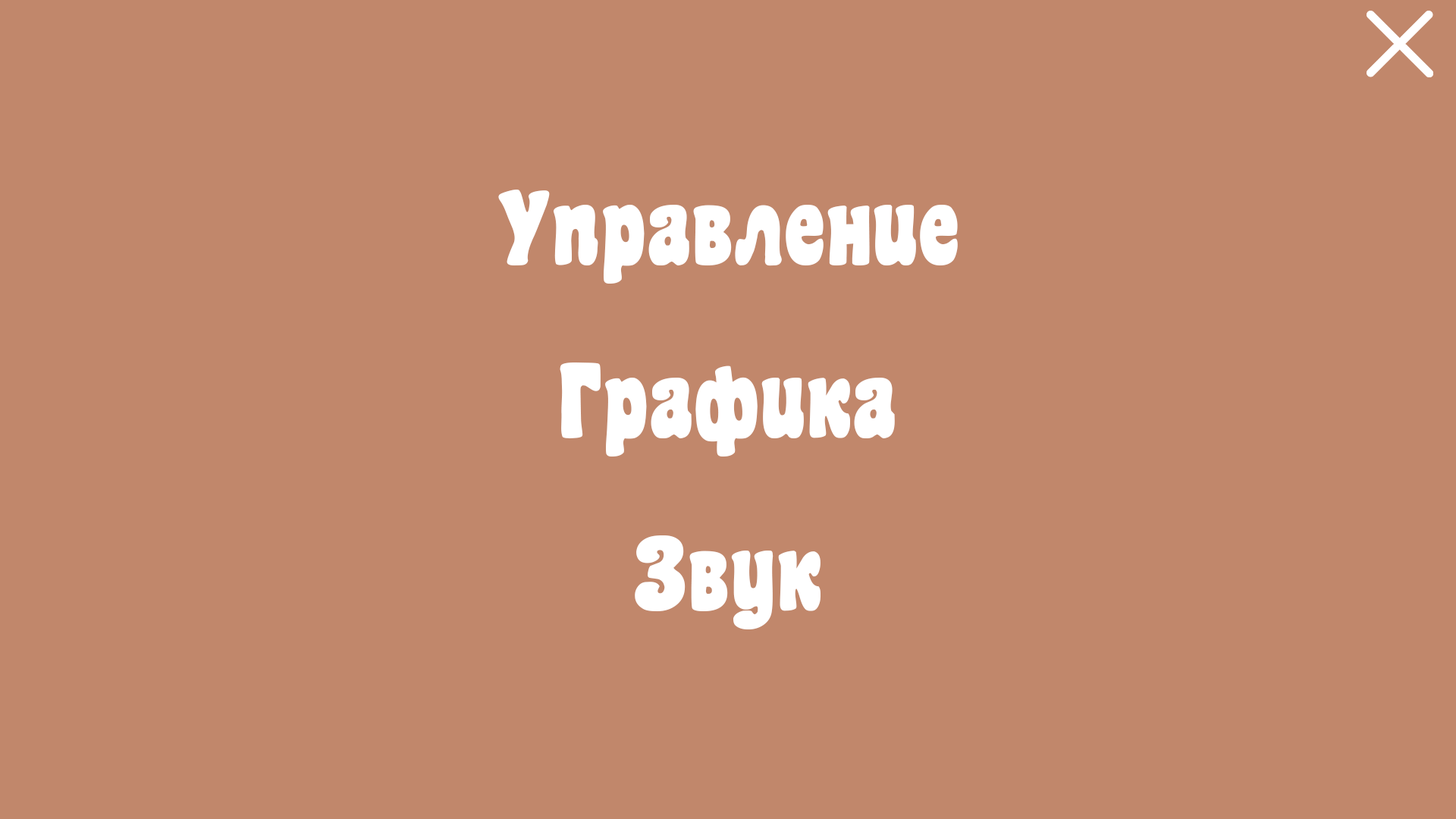
<style>
.page{position:relative;width:1456px;height:819px;background:#c1876b}
.page>*{position:absolute;margin:0}
.t1{font:94.8px "mr_CoasterG-Black";letter-spacing:0.005em;color:#ffffff}
</style>
<div class="page">
<p class="t1" style="left:498px;top:190px;width:460px;height:94px">Управление</p>
<p class="t1" style="left:560px;top:362px;width:335px;height:95px">Графика</p>
<p class="t1" style="left:635px;top:535px;width:186px;height:94px">Звук</p>
</div>
